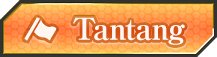
<style>
.page{position:relative;width:217px;height:57px}
.page>*{position:absolute;margin:0}
.t1{font:30px "RyuminPro-ExBold";letter-spacing:-0.04em;color:#fff7f3}
</style>
<div class="page">
<p class="t1" style="left:73px;top:17px;width:112px;height:28px">Tantang</p>
</div>
